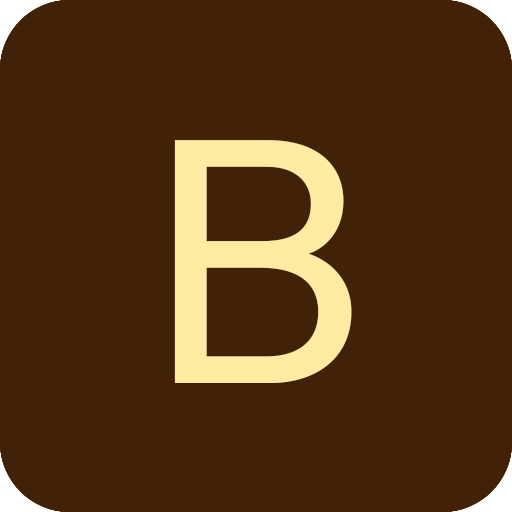
<style>
.page{position:relative;width:512px;height:512px;background:#412209}
.page>*{position:absolute;margin:0}
.t1{font:349px "AcuminConcept-Regular";color:#ffeba1}
</style>
<div class="page">
<p class="t1" style="left:174px;top:140px;width:178px;height:243px">B</p>
</div>
